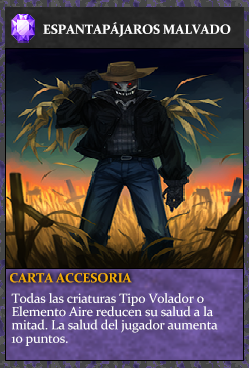
<style>
.page{position:relative;width:249px;height:368px}
.page>*{position:absolute;margin:0}
.t1{font:13.3px "Constantia-Bold";letter-spacing:-0.02em;color:#ffffff}
.t2{font:13.3px "Constantia-Bold";letter-spacing:-0.02em;color:#f2ac05}
.t3{font:13.3px/13.3px "Constantia";letter-spacing:-0.02em;color:#ffffff}
</style>
<div class="page">
<p class="t1" style="left:43px;top:22px;width:188px;height:15px">ESPANTAPÁJAROS MALVADO</p>
<p class="t2" style="left:10px;top:273px;width:122px;height:10px">CARTA ACCESORIA</p>
<p class="t3" style="left:11px;top:293px;width:207px;height:53px">Todas las criaturas Tipo Volador o<br>Elemento Aire reducen su salud a la<br>mitad. La salud del jugador aumenta<br>10 puntos.</p>
</div>
